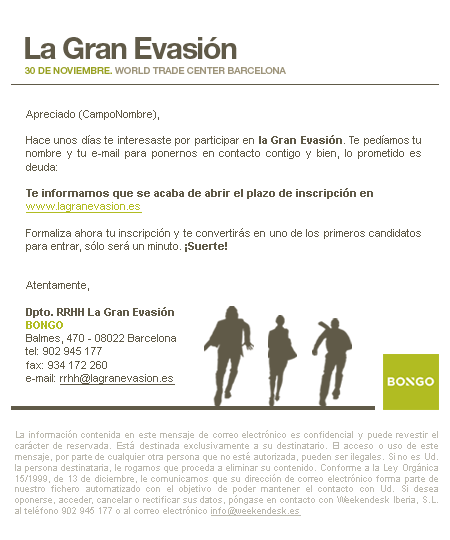
<style>
.page{position:relative;width:450px;height:540px;background:#ffffff}
.page>*{position:absolute;margin:0}
.t1{font:30px "HelveticaNeue-Bold";letter-spacing:-0.045em;color:#605a48}
.t2{font:9.5px "HelveticaNeue-Medium";color:#9d947a}
.t3{font:9.5px "HelveticaNeue-Medium";color:#98a123;text-transform:uppercase}
.t4{font:11px "ArialMT";color:#605a48}
.t5{font:11px "Arial-BoldMT";color:#605a48}
.t6{font:11px "ArialMT";color:#b1bc22;text-decoration:underline}
.t7{font:11px "Arial-BoldMT";color:#b1bc22}
.t8{font:11px "ArialMT";color:#605a48;text-decoration:underline}
.t9{font:9px "ArialMT";color:#bcb9af}
.t10{font:9px "ArialMT";color:#bcb9af;text-decoration:underline}
</style>
<div class="page">
<p class="t1" style="left:25px;top:37px;width:212px;height:22px">La Gran Evasión</p>
<p class="t2" style="left:25px;top:67px;width:261px;height:7px"><span class="t3">30 DE NOVIEMBRE.</span> WORLD TRADE CENTER BARCELONA</p>
<p class="t4" style="left:25px;top:110px;width:396px;height:275px;text-align:justify">Apreciado (CampoNombre), <br><br>Hace unos días te interesaste por participar en <span class="t5">la Gran Evasión</span>. Te pedíamos tu nombre y tu e-mail para ponernos en contacto contigo y bien, lo prometido es deuda: <br><br><span class="t5">Te informamos que se acaba de abrir el plazo de inscripción en <br></span><span class="t6">www.lagranevasion.es<br><br></span>Formaliza ahora tu inscripción y te convertirás en uno de los primeros candidatos para entrar, sólo será un minuto.<span class="t5"> ¡Suerte! <br></span><br><br>Atentamente, <br><br><span class="t5">Dpto. RRHH La Gran Evasión</span><span class="t7"> <br>BONGO <br></span>Balmes, 470 - 08022 Barcelona <br>tel: 902 945 177 <br>fax: 934 172 260 <br>e-mail: <span class="t8">rrhh@lagranevasion.es</span></p>
<p class="t9" style="left:15px;top:430px;width:423px;height:86px;text-align:justify">La información contenida en este mensaje de correo electrónico es confidencial y puede revestir el carácter de reservada. Está destinada exclusivamente a su destinatario. El acceso o uso de este mensaje, por parte de cualquier otra persona que no esté autorizada, pueden ser ilegales. Si no es Ud. la persona destinataria, le rogamos que proceda a eliminar su contenido. Conforme a la Ley Orgánica 15/1999, de 13 de diciembre, le comunicamos que su dirección de correo electrónico forma parte de nuestro fichero automatizado con el objetivo de poder mantener el contacto con Ud. Si desea oponerse, acceder, cancelar o rectificar sus datos, póngase en contacto con Weekendesk Iberia, S.L. al teléfono 902 945 177 o al correo electrónico <span class="t10">info@weekendesk.es</span></p>
</div>
